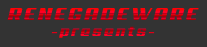
<style>
.page{position:relative;width:207px;height:47px;background:#333333}
.page>*{position:absolute;margin:0}
.t1{font:17.5px "Aero";letter-spacing:0.125em;scale:1.14 1}
.t2{font:13.6px "Aero";letter-spacing:0.125em;scale:1.14 1}
</style>
<div class="page">
<p class="t1" style="left:7px;top:8px;width:192px;height:30px;text-align:center">RENEGADEWARE<br><span class="t2">-presents-</span></p>
</div>
